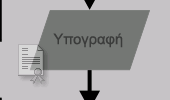
<style>
.page{position:relative;width:170px;height:100px;background:#c6c3c6}
.page>*{position:absolute;margin:0}
.t1{font:14.7px "ArialMT";color:#3b3c3b}
</style>
<div class="page">
<p class="t1" style="left:53px;top:33px;width:70px;height:15px">Υπογραφή</p>
</div>
